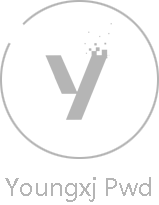
<style>
.page{position:relative;width:159px;height:205px;background:#ffffff}
.page>*{position:absolute;margin:0}
.t1{font:24px "MicrosoftYaHei";color:#b5b5b5}
</style>
<div class="page">
<p class="t1" style="left:5px;top:177px;width:146px;height:25px">Youngxj Pwd</p>
</div>
